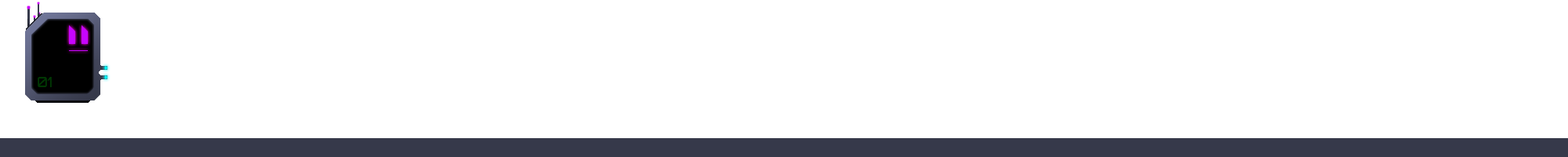
<style>
.page{position:relative;width:1568px;height:157px;background:#ffffff}
.page>*{position:absolute;margin:0}
.t1{font:14.1px "Orbitron-Medium";color:#003703;scale:0.89 1}
</style>
<div class="page">
<p class="t1" style="left:38px;top:76px;width:14px;height:12px">01</p>
</div>
